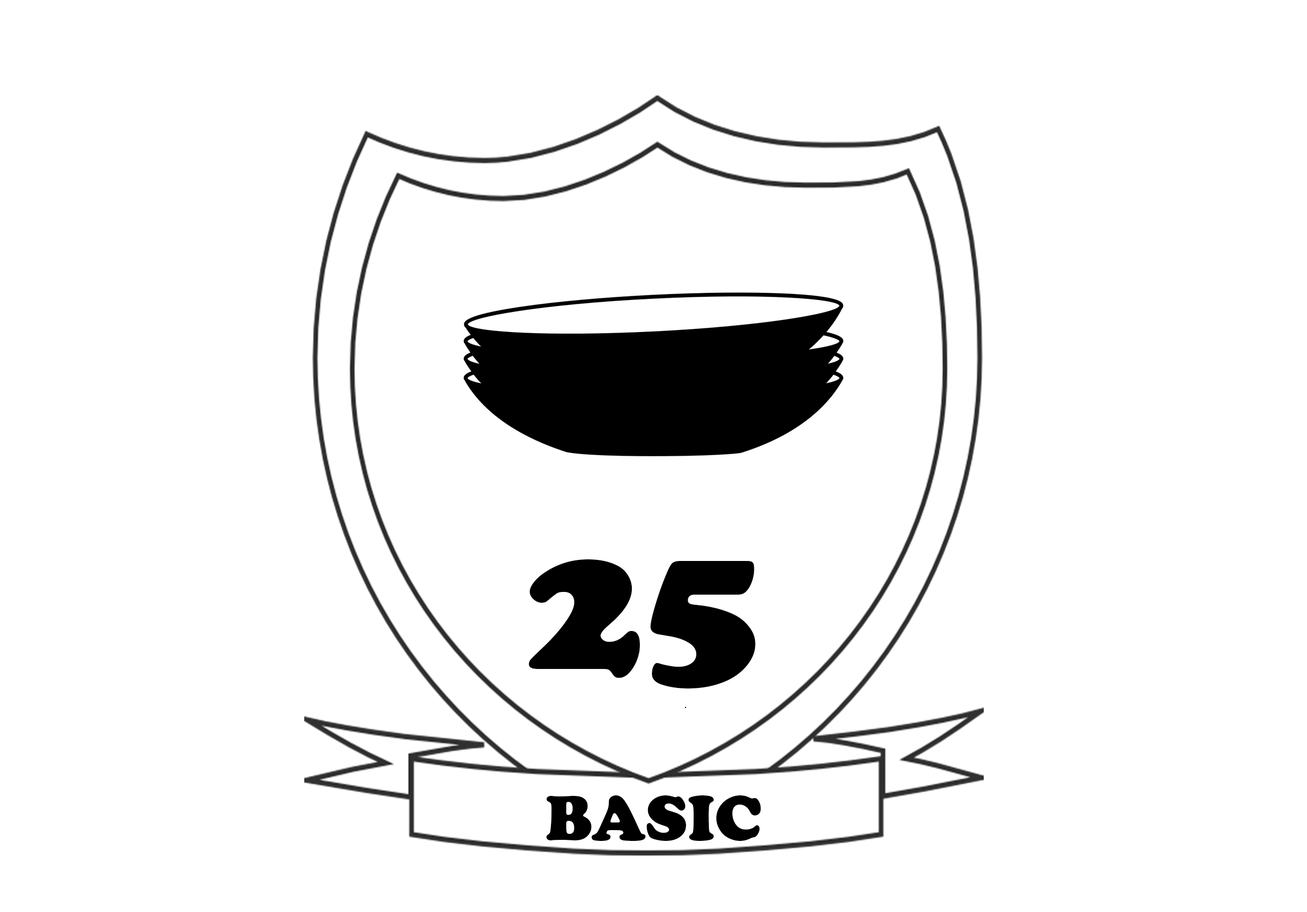
<style>
.page{position:relative;width:1307px;height:912px;background:#ffffff}
.page>*{position:absolute;margin:0}
.t1{font:195.3px "CooperBlack";color:#000000}
.t2{font:65.1px "CooperBlack";color:#000000}
</style>
<div class="page">
<p class="t1" style="left:529px;top:559px;width:227px;height:129px">25</p>
<p class="t2" style="left:546px;top:795px;width:215px;height:46px">BASIC</p>
</div>
